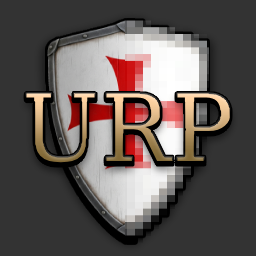
<style>
.page{position:relative;width:256px;height:256px;background:#333333}
.page>*{position:absolute;margin:0}
.t1{font:94px "DejaVuSerif"}
</style>
<div class="page">
<p class="t1" style="left:25px;top:92px;width:206px;height:71px">URP</p>
</div>
